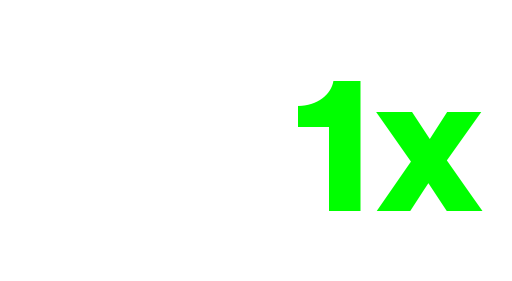
<style>
.page{position:relative;width:512px;height:281px;background:#ffffff}
.page>*{position:absolute;margin:0}
.t1{font:200px "CircularStd-Black";color:#00ff00}
</style>
<div class="page">
<p class="t1" style="left:298px;top:81px;width:185px;height:130px">1x</p>
</div>
